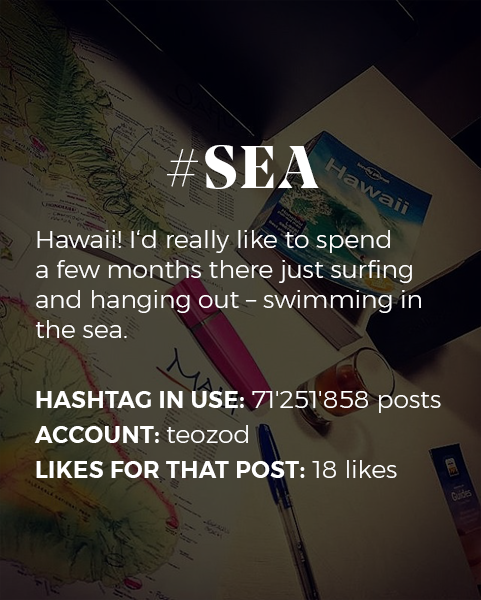
<style>
.page{position:relative;width:481px;height:600px}
.page>*{position:absolute;margin:0}
.t1{font:25px "Montserrat-Light";color:#ffffff}
.t2{font:60px "NoeDisplay-Bold";letter-spacing:0.05em;color:#ffffff;text-transform:uppercase}
.t3{font:23px/35px "Montserrat-SemiBold";letter-spacing:0.02em;color:#ffffff;text-transform:uppercase}
.t4{font:25px/35px "Montserrat-Light";color:#ffffff}
</style>
<div class="page">
<p class="t1" style="left:34px;top:145px;width:407px;height:333px;text-align:center"><span class="t2">#sea<br></span><br>Hawaii! I‘d really like to spend <br>a few months there just surfing and hanging out – swimming in the sea.<br><br><span class="t3">Hashtag in use:</span><span class="t4"> 71'251'858 posts<br></span><span class="t3">Account: </span><span class="t4">teozod<br></span><span class="t3">Likes for that post:</span><span class="t4"> 18 likes</span></p>
</div>
